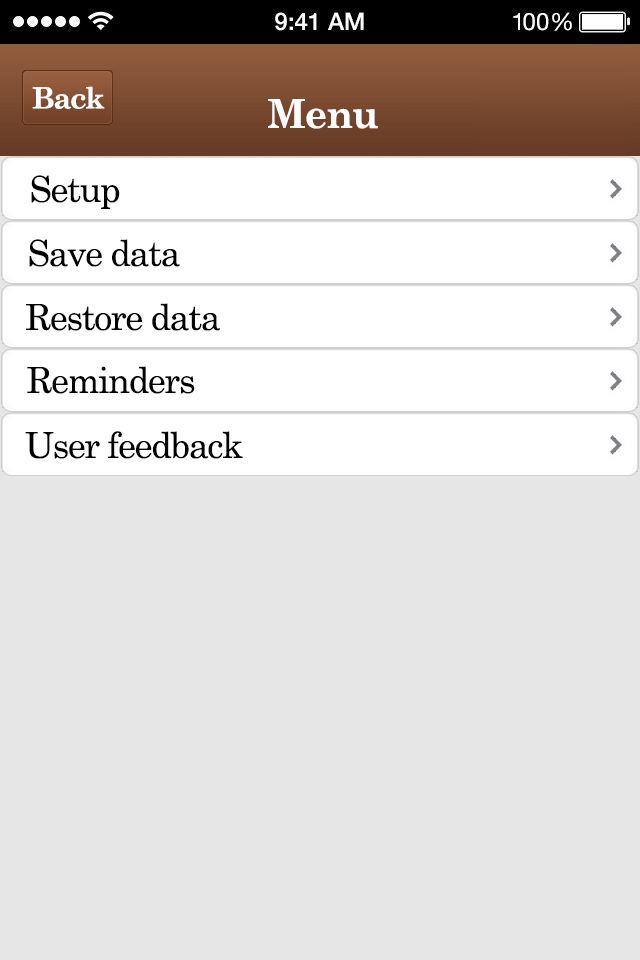
<style>
.page{position:relative;width:640px;height:960px;background:#e6e6e6}
.page>*{position:absolute;margin:0}
.t1{font:29.3px "CenturySchoolbook-Bold";letter-spacing:-0.04em;color:#ffffff}
.t2{font:40px "CenturySchoolbook-Bold";letter-spacing:-0.04em;color:#fffefe}
.t3{font:36px "CenturySchoolbook";letter-spacing:-0.04em;color:#000000}
</style>
<div class="page">
<p class="t1" style="left:32px;top:86px;width:73px;height:23px">Back</p>
<p class="t2" style="left:268px;top:99px;width:110px;height:30px">Menu</p>
<p class="t3" style="left:31px;top:175px;width:89px;height:34px">Setup</p>
<p class="t3" style="left:29px;top:239px;width:151px;height:28px">Save data</p>
<p class="t3" style="left:26px;top:303px;width:194px;height:28px">Restore data</p>
<p class="t3" style="left:27px;top:366px;width:168px;height:28px">Reminders</p>
<p class="t3" style="left:25px;top:431px;width:218px;height:28px">User feedback</p>
</div>
